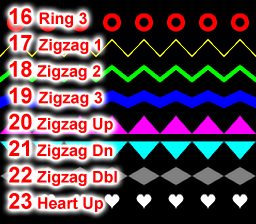
<style>
.page{position:relative;width:256px;height:224px;background:#000000}
.page>*{position:absolute;margin:0}
.t1{font:16px "Arial-BoldMT";color:#ff0000}
.t2{font:22px "Arial-BoldMT";color:#ff0000}
</style>
<div class="page">
<p class="t1" style="left:9px;top:8px;width:108px;height:204px"><span class="t2">16 </span>Ring 3<br><span class="t2">17 </span>Zigzag 1<br><span class="t2">18</span> Zigzag 2<br><span class="t2">19 </span>Zigzag 3<br><span class="t2">20</span> Zigzag Up<br><span class="t2">21</span> Zigzag Dn<br><span class="t2">22</span> Zigzag Dbl<br><span class="t2">23</span> Heart Up</p>
</div>
